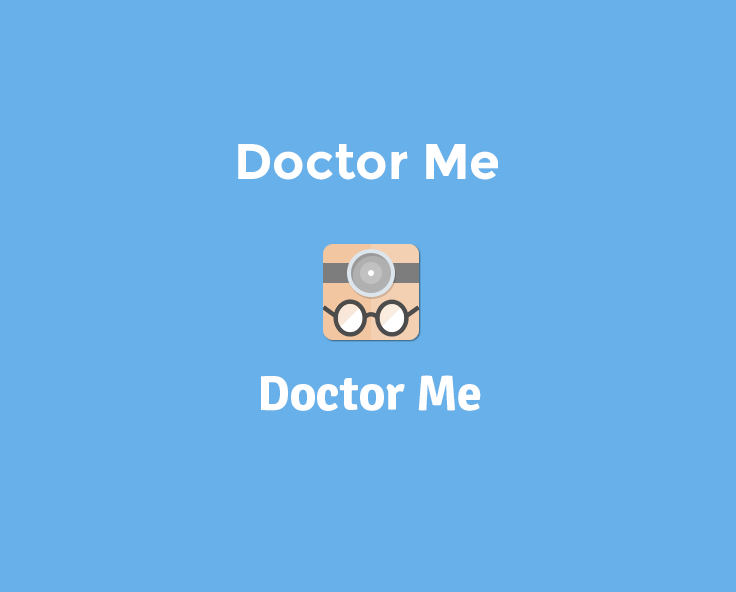
<style>
.page{position:relative;width:736px;height:592px;background:#68b0e9}
.page>*{position:absolute;margin:0}
.t1{font:50px "Montserrat-Bold";color:#ffffff}
.t2{font:50px "Signika-Bold";color:#ffffff}
</style>
<div class="page">
<p class="t1" style="left:238px;top:144px;width:260px;height:36px">Doctor Me</p>
<p class="t2" style="left:261px;top:375px;width:220px;height:36px">Doctor Me</p>
</div>
